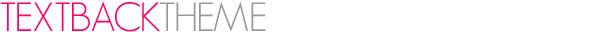
<style>
.page{position:relative;width:600px;height:32px;background:#ffffff}
.page>*{position:absolute;margin:0}
.t1{font:40px "GeosansLight";color:#ff0066}
.t2{font:40px "GeosansLight";color:#999999}
</style>
<div class="page">
<p class="t1" style="left:0px;top:1px;width:266px;height:31px">TEXTBACK<span class="t2">THEME</span></p>
</div>
